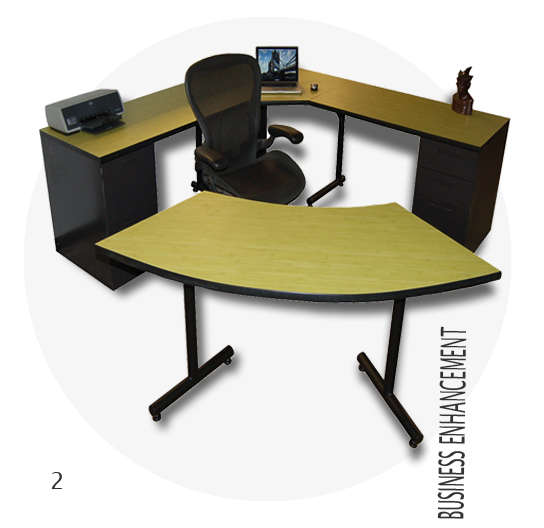
<style>
.page{position:relative;width:544px;height:528px;background:#ffffff}
.page>*{position:absolute;margin:0}
.t1{font:35.1px "LucidaSansUnicode";color:#333333;scale:0.45 1}
.t2{font:23px "LucidaSansUnicode";color:#333333}
</style>
<div class="page">
<p class="t1" style="left:437px;top:326px;width:30px;height:193px;rotate:-89deg">BUSINESS ENHANCEMENT</p>
<p class="t2" style="left:51px;top:472px;width:11px;height:17px">2</p>
</div>
